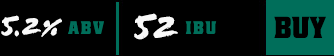
<style>
.page{position:relative;width:334px;height:56px;background:#000000}
.page>*{position:absolute;margin:0}
.t1{font:28px "FloodStd";color:#f9f9f9;text-transform:uppercase}
.t2{font:36px "FloodStd";color:#f9f9f9;text-transform:uppercase}
.t3{font:30px "Alley-Oop";color:#000000;text-transform:uppercase}
.t4{font:18px "Alley-Oop";letter-spacing:0.1em;color:#006e5a;text-transform:uppercase}
</style>
<div class="page">
<p class="t1" style="left:1px;top:15px;width:61px;height:22px">5.2%</p>
<p class="t2" style="left:134px;top:13px;width:44px;height:27px">52</p>
<p class="t3" style="left:274px;top:16px;width:52px;height:22px">buy</p>
<p class="t4" style="left:68px;top:21px;width:36px;height:13px">abv</p>
<p class="t4" style="left:185px;top:21px;width:32px;height:13px">ibu</p>
</div>
